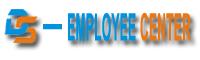
<style>
.page{position:relative;width:200px;height:60px;background:#ffffff}
.page>*{position:absolute;margin:0}
.t1{font:37.7px "Arial-BoldMT";letter-spacing:0.025em;color:#0093dd;scale:0.32 1}
.t2{font:37.7px "Arial-BoldMT";letter-spacing:0.025em;color:#e67817;scale:0.32 1}
.t3{font:37.7px "Arial-BoldMT";letter-spacing:0.025em;color:#0093dd;scale:1.83 1}
</style>
<div class="page">
<p class="t1" style="left:68px;top:12px;width:123px;height:29px">EMPLOYEE <span class="t2">CENTER</span></p>
<p class="t3" style="left:43px;top:24px;width:19px;height:6px">-</p>
</div>
